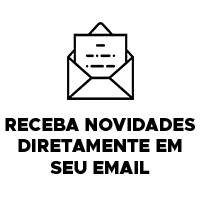
<style>
.page{position:relative;width:200px;height:200px;background:#ffffff}
.page>*{position:absolute;margin:0}
.t1{font:18px "Metropolis-Black";color:#000000}
</style>
<div class="page">
<p class="t1" style="left:5px;top:118px;width:190px;height:56px;text-align:center">RECEBA NOVIDADES DIRETAMENTE EM SEU EMAIL</p>
</div>
